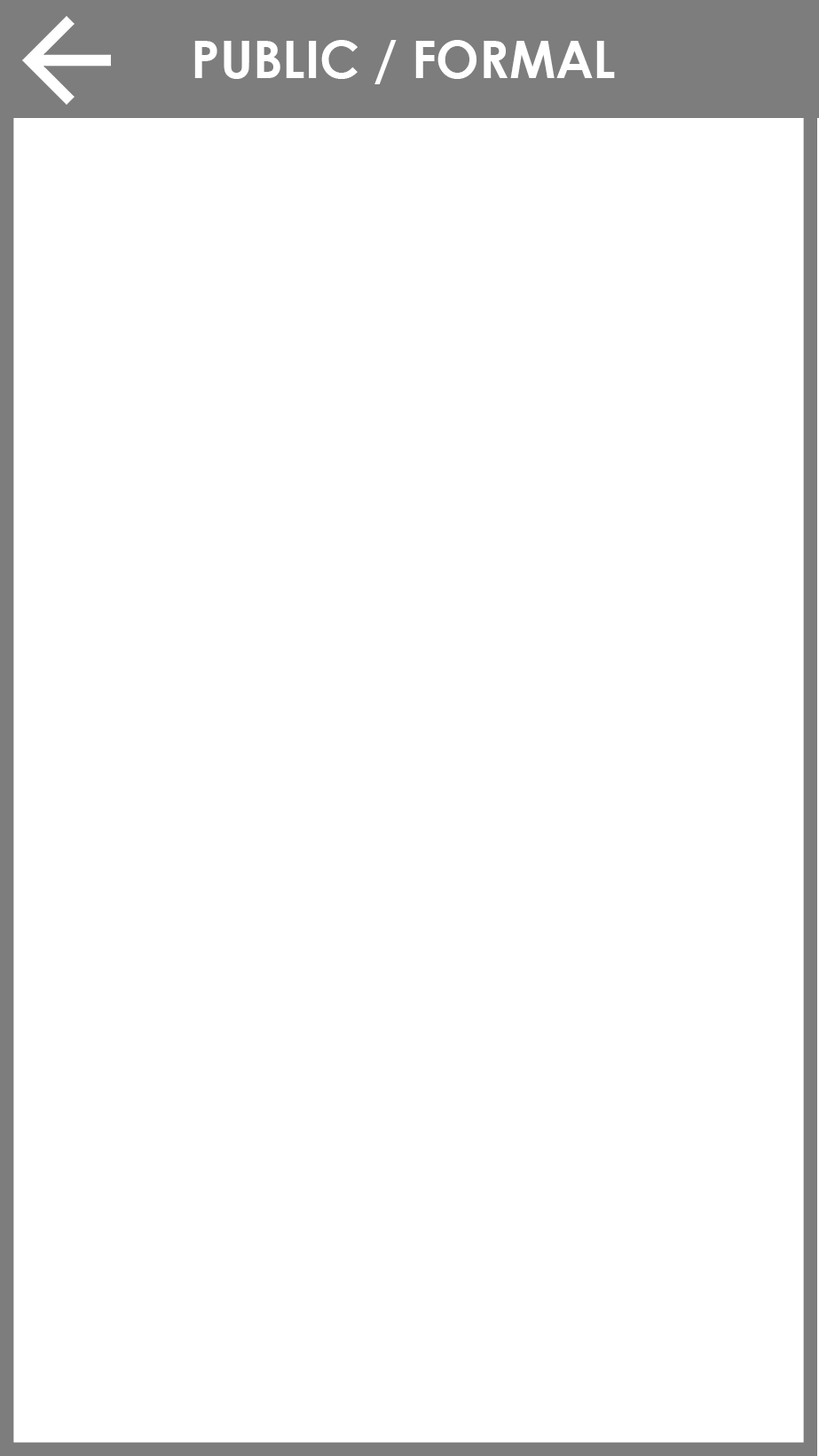
<style>
.page{position:relative;width:819px;height:1456px;background:#ffffff}
.page>*{position:absolute;margin:0}
.t1{font:51.3px "CenturyGothic-Bold";color:#ffffff}
</style>
<div class="page">
<p class="t1" style="left:194px;top:40px;width:421px;height:44px">PUBLIC / FORMAL</p>
</div>
